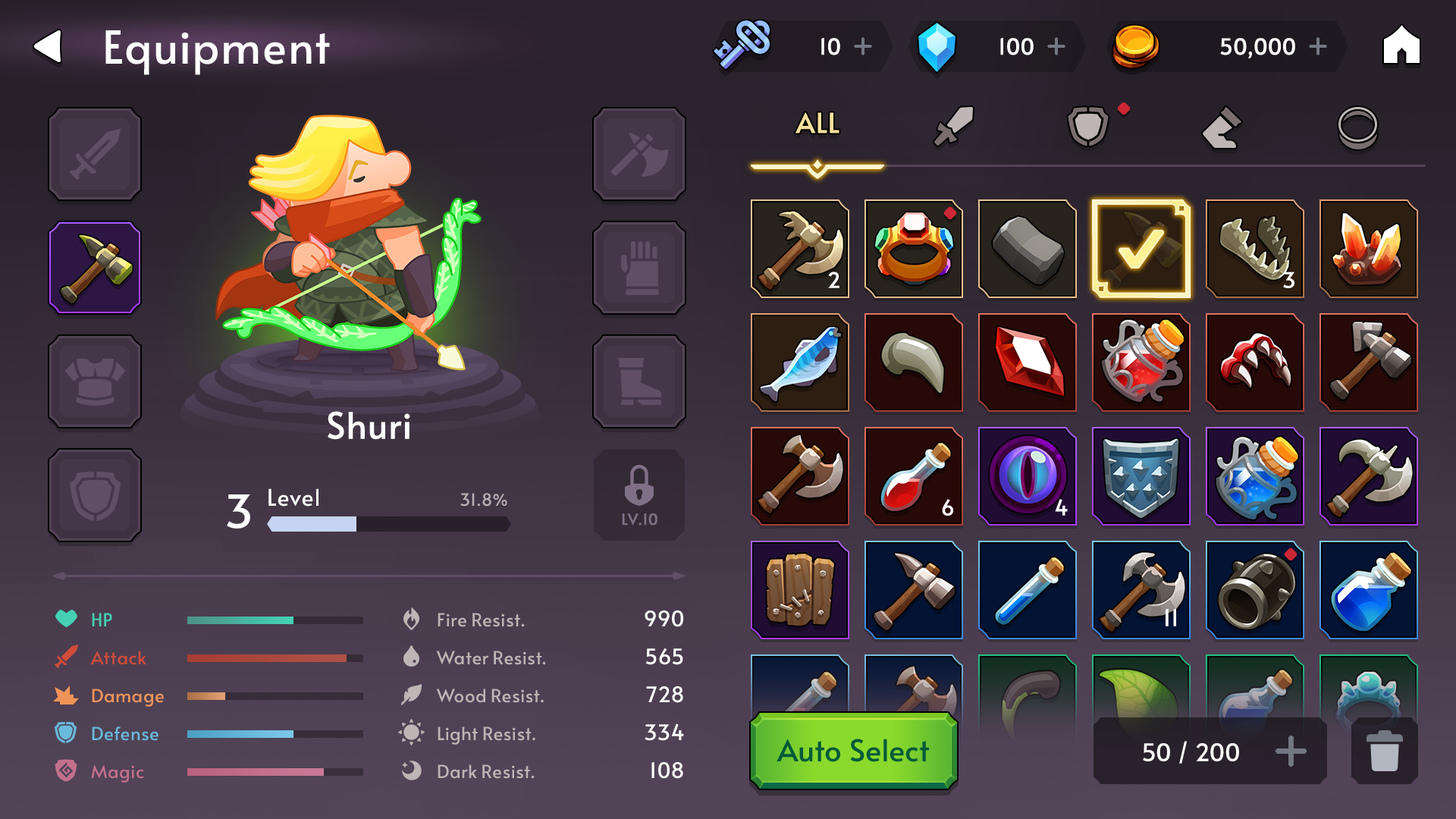
<style>
.page{position:relative;width:1456px;height:819px}
.page>*{position:absolute;margin:0}
.t1{font:45.5px "Alata-Regular";color:#ffffff}
.t2{font:21.9px "Alata-Regular";letter-spacing:-0.025em;color:#ffffff;font-weight:bold}
.t3{font:27.3px "Alata-Regular";color:#f6e19c;text-transform:uppercase;font-weight:bold}
.t4{font:21.2px "Alata-Regular";letter-spacing:-0.01em;color:#ffffff}
.t5{font:36.4px "Alata-Regular";letter-spacing:-0.01em;color:#ffffff}
.t6{font:22.7px "Alata-Regular";color:#ffffff}
.t7{font:16.7px "Alata-Regular";color:#b7b1b5}
.t8{font:15.2px "Alata-Regular";letter-spacing:-0.025em;color:#807086;text-transform:uppercase;font-weight:bold}
.t9{font:18.2px/37.9px "Alata-Regular";letter-spacing:-0.01em;color:#68b9db}
.t10{font:18.2px/37.9px "Alata-Regular";letter-spacing:-0.01em;color:#45d0b2}
.t11{font:18.2px/37.9px "Alata-Regular";letter-spacing:-0.01em;color:#d14b39}
.t12{font:18.2px/37.9px "Alata-Regular";letter-spacing:-0.01em;color:#ef9458}
.t13{font:18.2px/37.9px "Alata-Regular";letter-spacing:-0.01em;color:#c3708c}
.t14{font:18.2px/37.9px "Alata-Regular";letter-spacing:-0.01em;color:#beb5b6}
.t15{font:21.2px/37.9px "Alata-Regular";letter-spacing:-0.01em;color:#ffffff}
.t16{font:22.7px "Alata-Regular";letter-spacing:-0.01em;color:#ffffff}
.t17{font:30.3px "Alata-Regular";color:#045a39}
.t18{font:24.3px "Alata-Regular";color:#ffffff}
</style>
<div class="page">
<p class="t1" style="left:105px;top:30px;width:225px;height:45px">Equipment</p>
<p class="t2" style="left:821px;top:37px;width:19px;height:18px">10</p>
<p class="t2" style="left:1000px;top:37px;width:34px;height:18px">100</p>
<p class="t2" style="left:1220px;top:38px;width:75px;height:20px">50,000</p>
<p class="t3" style="left:795px;top:112px;width:44px;height:21px">All</p>
<p class="t4" style="left:828px;top:271px;width:11px;height:17px">2</p>
<p class="t4" style="left:1283px;top:271px;width:11px;height:17px">3</p>
<p class="t5" style="left:328px;top:411px;width:82px;height:29px">Shuri</p>
<p class="t1" style="left:227px;top:494px;width:23px;height:35px">3</p>
<p class="t6" style="left:268px;top:488px;width:50px;height:19px">Level</p>
<p class="t7" style="left:460px;top:493px;width:47px;height:14px">31.8%</p>
<p class="t4" style="left:942px;top:499px;width:11px;height:17px">6</p>
<p class="t4" style="left:1055px;top:499px;width:13px;height:17px">4</p>
<p class="t8" style="left:622px;top:513px;width:35px;height:13px">lv.10</p>
<p class="t9" style="left:90px;top:613px;width:74px;height:170px"><span class="t10">HP<br></span><span class="t11">Attack<br></span><span class="t12">Damage<br></span>Defense<br><span class="t13">Magic</span></p>
<p class="t14" style="left:436px;top:613px;width:110px;height:166px">Fire Resist.<br>Water Resist.<br>Wood Resist.<br>Light Resist.<br>Dark Resist.</p>
<p class="t15" style="left:645px;top:610px;width:39px;height:169px;text-align:right">990<br>565<br>728<br>334<br>108</p>
<p class="t16" style="left:1166px;top:608px;width:10px;height:18px">11</p>
<p class="t17" style="left:777px;top:739px;width:152px;height:23px">Auto Select</p>
<p class="t18" style="left:1143px;top:741px;width:96px;height:23px">50 / 200</p>
</div>
